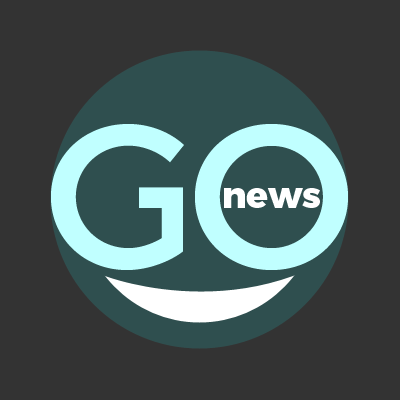
<style>
.page{position:relative;width:400px;height:400px;background:#333333}
.page>*{position:absolute;margin:0}
.t1{font:205.8px "Montserrat-Regular";letter-spacing:-0.05em;color:#c0ffff}
.t2{font:36px "Montserrat-ExtraBold";color:#ffffff}
</style>
<div class="page">
<p class="t1" style="left:51px;top:124px;width:297px;height:146px">GO</p>
<p class="t2" style="left:224px;top:188px;width:96px;height:20px">news</p>
</div>
